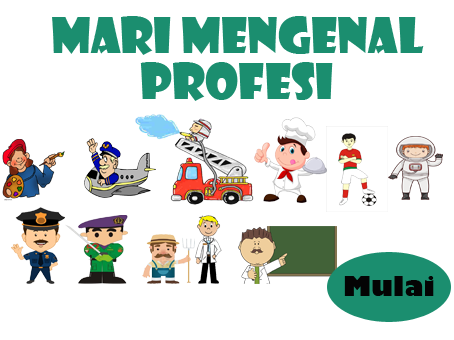
<style>
.page{position:relative;width:454px;height:340px;background:#ffffff}
.page>*{position:absolute;margin:0}
.t1{font:48px "ShowcardGothic-Reg";color:#1b8e6f}
.t2{font:27px "GillSans-UltraBold";color:#040404}
</style>
<div class="page">
<p class="t1" style="left:52px;top:16px;width:372px;height:39px">Mari Mengenal</p>
<p class="t1" style="left:140px;top:62px;width:193px;height:39px">Profesi</p>
<p class="t2" style="left:344px;top:276px;width:90px;height:20px">Mulai</p>
</div>
